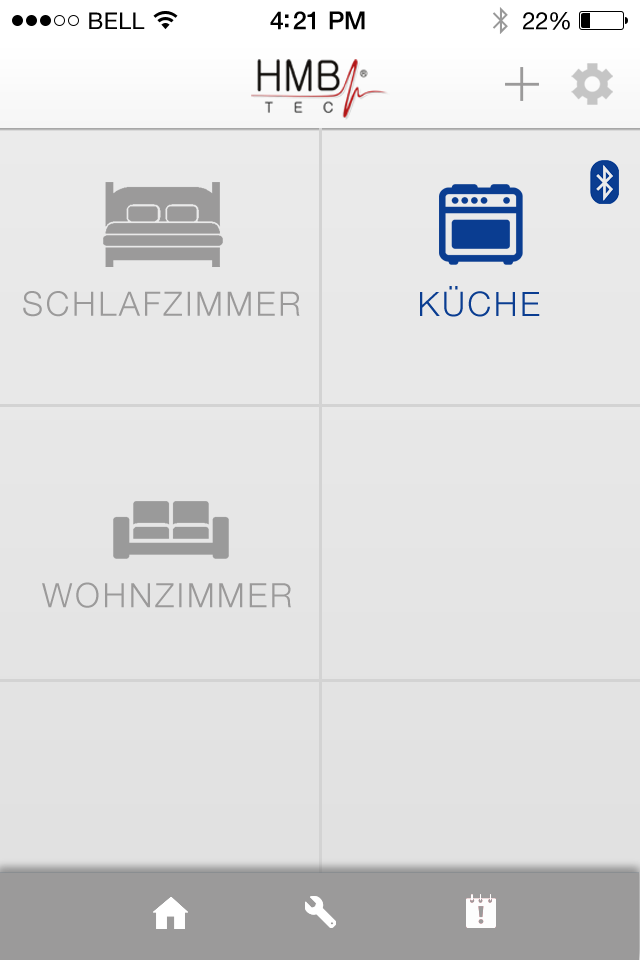
<style>
.page{position:relative;width:640px;height:960px}
.page>*{position:absolute;margin:0}
.t1{font:23px "HelveticaNeue";letter-spacing:0.02em;color:#000000}
.t2{font:25px "HelveticaNeue-Medium";letter-spacing:-0.02em;color:#000000}
.t3{font:24px "HelveticaNeue";letter-spacing:-0.02em;color:#000000}
.t4{font:33.8px "HelveticaNeue-Light";letter-spacing:0.08em;color:#9b9a9a}
.t5{font:33.8px "HelveticaNeue-Light";letter-spacing:0.08em;color:#0a3d91}
</style>
<div class="page">
<p class="t1" style="left:89px;top:12px;width:56px;height:17px">BELL</p>
<p class="t2" style="left:270px;top:11px;width:95px;height:19px">4:21 PM</p>
<p class="t3" style="left:522px;top:11px;width:48px;height:19px">22%</p>
<p class="t4" style="left:23px;top:291px;width:277px;height:26px">SCHLAFZIMMER</p>
<p class="t5" style="left:420px;top:286px;width:120px;height:31px">KÜCHE</p>
<p class="t4" style="left:42px;top:582px;width:249px;height:26px">WOHNZIMMER</p>
</div>
